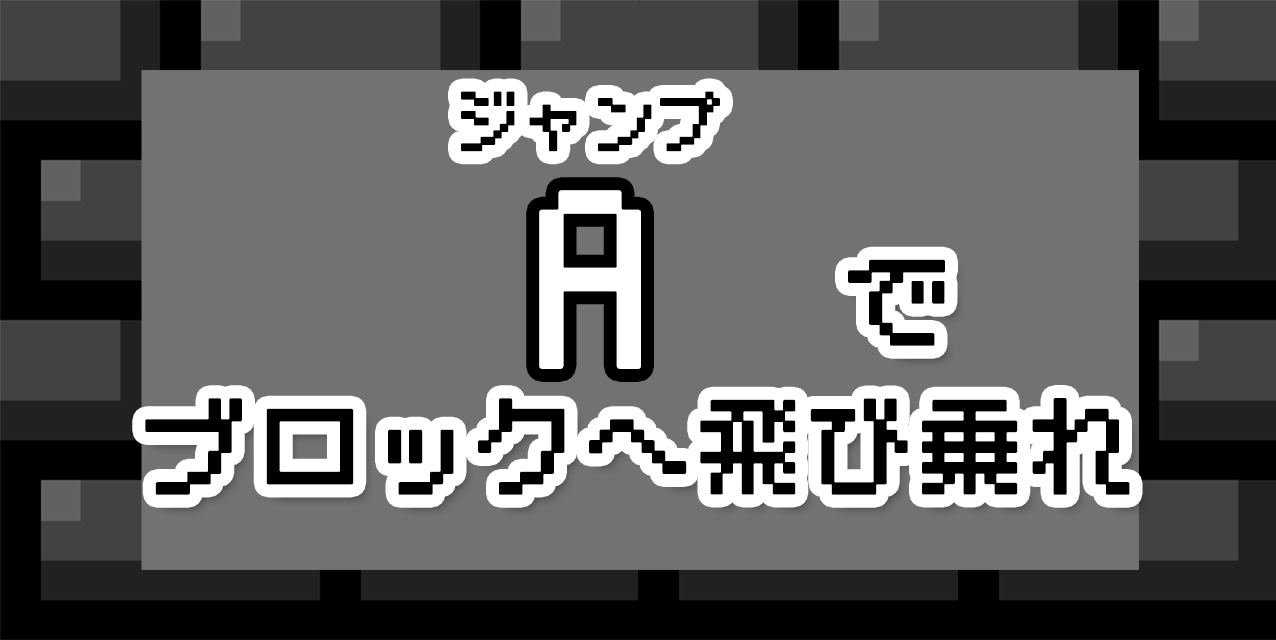
<style>
.page{position:relative;width:1276px;height:640px;background:#727272}
.page>*{position:absolute;margin:0}
.t1{font:66.7px "BestTen-CRT";color:#000000;font-weight:bold}
.t2{font:200px "BestTen-CRT";color:#ffffff;font-weight:bold}
.t3{font:108px "BestTen-CRT";color:#000000;font-weight:bold}
</style>
<div class="page">
<p class="t1" style="left:461px;top:91px;width:259px;height:61px">ジャンプ</p>
<p class="t2" style="left:539px;top:190px;width:102px;height:179px">A</p>
<p class="t3" style="left:848px;top:259px;width:97px;height:87px">で</p>
<p class="t3" style="left:145px;top:398px;width:985px;height:97px">ブロックへ飛び乗れ</p>
</div>
